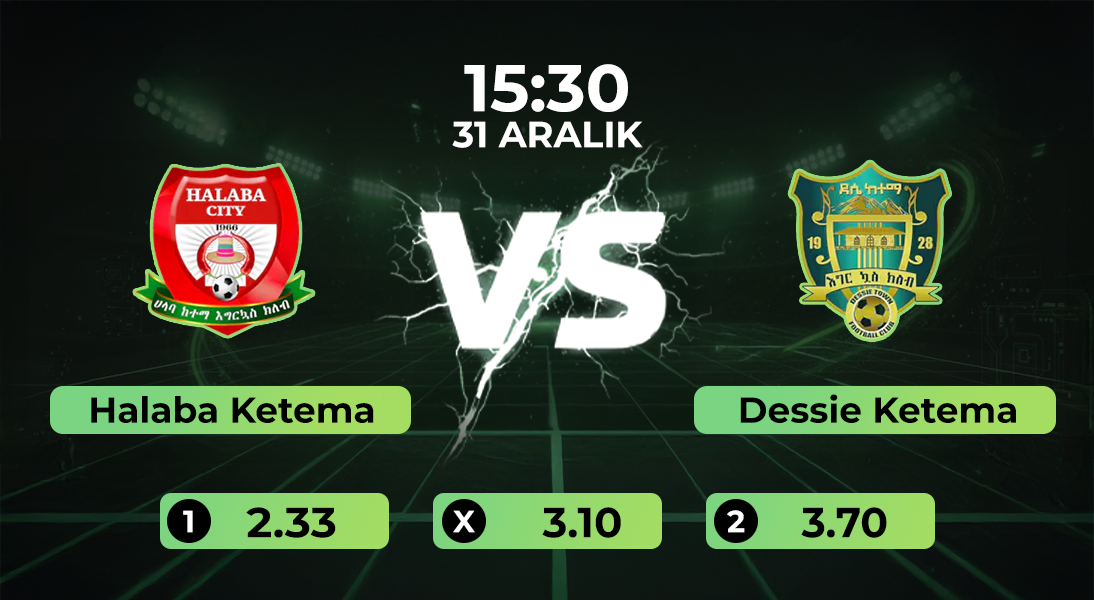
<style>
.page{position:relative;width:1094px;height:600px}
.page>*{position:absolute;margin:0}
.t1{font:66.1px "Montserrat-Bold";color:#ffffff}
.t2{font:36.5px "Montserrat-Bold";color:#ffffff}
.t3{font:36px "Montserrat-Bold";color:#000000}
.t4{font:30.8px "Montserrat-Bold";color:#ffffff}
.t5{font:42px "Montserrat-Bold";color:#000000;scale:1.05 1}
.t6{font:42px "Montserrat-Bold";color:#000000}
</style>
<div class="page">
<p class="t1" style="left:464px;top:64px;width:164px;height:48px">15:30</p>
<p class="t2" style="left:452px;top:121px;width:191px;height:27px">31 ARALIK</p>
<p class="t3" style="left:91px;top:396px;width:283px;height:27px">Halaba Ketema</p>
<p class="t3" style="left:740px;top:394px;width:276px;height:29px">Dessie Ketema</p>
<p class="t4" style="left:183px;top:510px;width:10px;height:23px">1</p>
<p class="t5" style="left:246px;top:507px;width:90px;height:31px">2.33</p>
<p class="t4" style="left:453px;top:510px;width:22px;height:23px">X</p>
<p class="t6" style="left:542px;top:507px;width:79px;height:31px">3.10</p>
<p class="t4" style="left:727px;top:510px;width:18px;height:23px">2</p>
<p class="t6" style="left:801px;top:507px;width:86px;height:31px">3.70</p>
</div>
